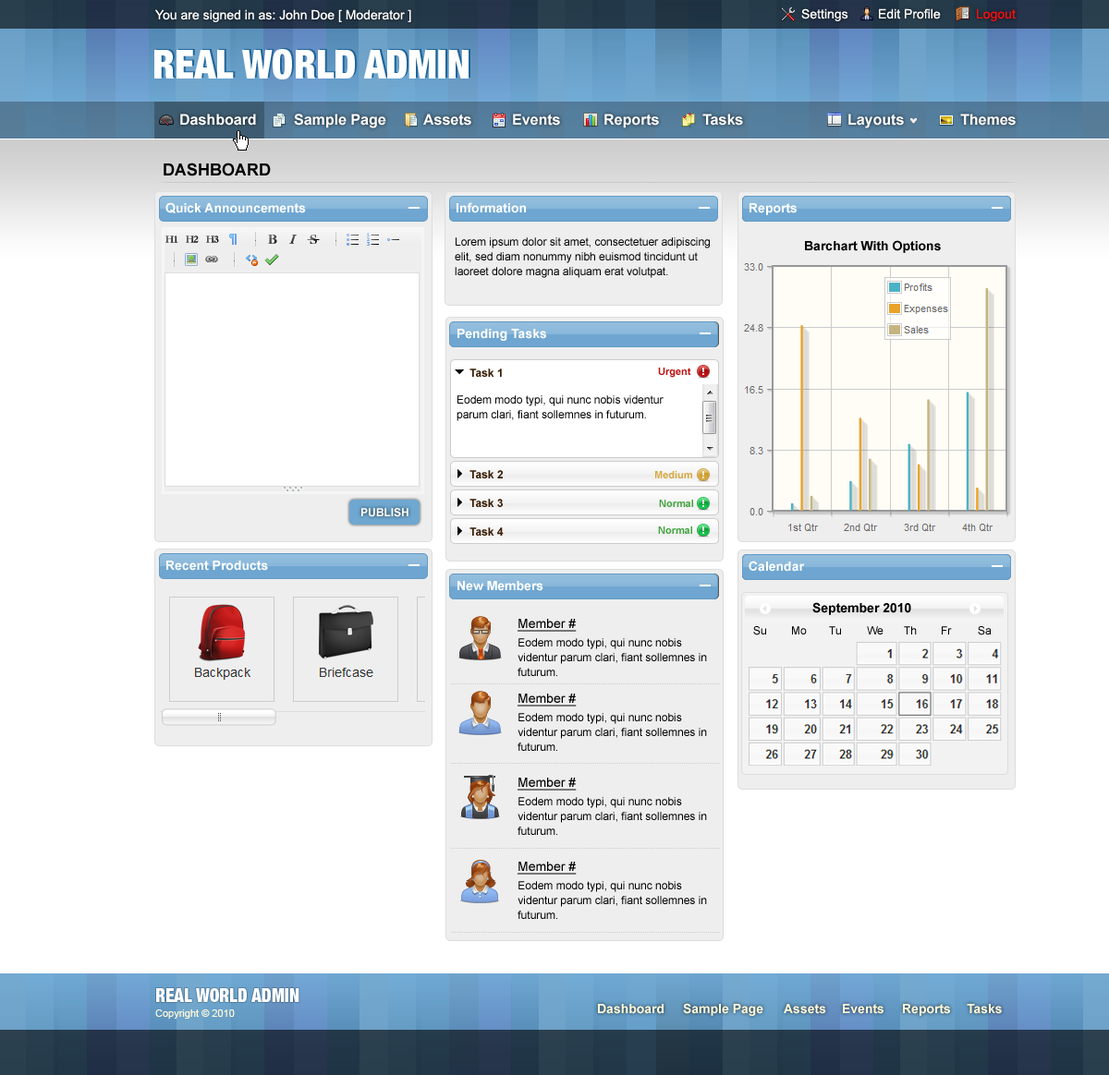
<style>
.page{position:relative;width:1109px;height:1075px;background:#ffffff}
.page>*{position:absolute;margin:0}
.t1{font:12.9px "ArialMT";color:#ffffff}
.t2{font:12.9px "ArialMT";color:#fa0f0f}
.t3{font:14.8px "Arial-BoldMT";color:#ffffff}
.t4{font:16.6px "Arial-BoldMT";color:#000000;text-transform:uppercase}
.t5{font:12.9px "Arial-BoldMT";color:#ffffff}
.t6{font:11.1px/14.8px "ArialMT";color:#000000}
.t7{font:12.9px "Arial-BoldMT";color:#000000}
.t8{font:11.1px "Arial-BoldMT";color:#371c04}
.t9{font:10.2px "Arial-BoldMT";color:#be1111}
.t10{font:10.2px "Arial-BoldMT";color:#d6a73e}
.t11{font:11.1px "Arial-BoldMT";color:#ffffff;text-transform:uppercase}
.t12{font:10.2px "Arial-BoldMT";color:#41a13c}
.t13{font:12.9px "ArialMT";color:#000000;text-decoration:underline}
.t14{font:11.1px "ArialMT";color:#000000}
.t15{font:10.2px "ArialMT";color:#fff9d8}
.t16{font:12.9px "Arial-BoldMT";color:#fff9d8}
</style>
<div class="page">
<p class="t1" style="left:155px;top:9px;width:256px;height:13px">You are signed in as: John Doe [ Moderator ]</p>
<p class="t1" style="left:801px;top:8px;width:47px;height:13px">Settings</p>
<p class="t1" style="left:879px;top:8px;width:62px;height:11px">Edit Profile</p>
<p class="t2" style="left:977px;top:8px;width:38px;height:13px">Logout</p>
<p class="t3" style="left:180px;top:114px;width:76px;height:12px">Dashboard</p>
<p class="t3" style="left:294px;top:114px;width:92px;height:14px">Sample Page</p>
<p class="t3" style="left:423px;top:114px;width:48px;height:12px">Assets</p>
<p class="t3" style="left:513px;top:114px;width:47px;height:12px">Events</p>
<p class="t3" style="left:604px;top:114px;width:55px;height:14px">Reports</p>
<p class="t3" style="left:702px;top:114px;width:41px;height:12px">Tasks</p>
<p class="t3" style="left:848px;top:114px;width:56px;height:14px">Layouts</p>
<p class="t3" style="left:960px;top:114px;width:55px;height:12px">Themes</p>
<p class="t4" style="left:164px;top:163px;width:107px;height:13px">DASHBOARD</p>
<p class="t5" style="left:165px;top:202px;width:141px;height:11px">Quick Announcements</p>
<p class="t5" style="left:456px;top:202px;width:70px;height:11px">Information</p>
<p class="t5" style="left:749px;top:203px;width:47px;height:12px">Reports</p>
<p class="t6" style="left:455px;top:237px;width:255px;height:41px">Lorem ipsum dolor sit amet, consectetuer adipiscing elit, sed diam nonummy nibh euismod tincidunt ut laoreet dolore magna aliquam erat volutpat.</p>
<p class="t7" style="left:805px;top:240px;width:136px;height:13px">Barchart With Options</p>
<p class="t5" style="left:457px;top:329px;width:89px;height:12px">Pending Tasks</p>
<p class="t8" style="left:469px;top:369px;width:33px;height:8px">Task 1</p>
<p class="t9" style="left:658px;top:368px;width:33px;height:10px">Urgent</p>
<p class="t6" style="left:456px;top:395px;width:207px;height:26px">Eodem modo typi, qui nunc nobis videntur parum clari, fiant sollemnes in futurum.</p>
<p class="t8" style="left:469px;top:470px;width:34px;height:9px">Task 2</p>
<p class="t10" style="left:655px;top:471px;width:37px;height:8px">Medium</p>
<p class="t11" style="left:361px;top:508px;width:47px;height:9px">Publish</p>
<p class="t8" style="left:469px;top:499px;width:34px;height:8px">Task 3</p>
<p class="t12" style="left:659px;top:500px;width:34px;height:7px">Normal</p>
<p class="t8" style="left:469px;top:528px;width:35px;height:8px">Task 4</p>
<p class="t12" style="left:658px;top:527px;width:34px;height:7px">Normal</p>
<p class="t5" style="left:166px;top:561px;width:102px;height:10px">Recent Products</p>
<p class="t5" style="left:748px;top:561px;width:57px;height:11px">Calendar</p>
<p class="t5" style="left:457px;top:581px;width:86px;height:10px">New Members</p>
<p class="t7" style="left:812px;top:602px;width:99px;height:13px">September 2010</p>
<p class="t13" style="left:517px;top:619px;width:60px;height:13px">Member #</p>
<p class="t14" style="left:753px;top:626px;width:13px;height:10px">Su</p>
<p class="t14" style="left:792px;top:626px;width:15px;height:9px">Mo</p>
<p class="t14" style="left:829px;top:626px;width:12px;height:9px">Tu</p>
<p class="t14" style="left:867px;top:626px;width:16px;height:9px">We</p>
<p class="t14" style="left:904px;top:626px;width:13px;height:9px">Th</p>
<p class="t14" style="left:942px;top:626px;width:10px;height:9px">Fr</p>
<p class="t14" style="left:978px;top:626px;width:13px;height:10px">Sa</p>
<p class="t6" style="left:517px;top:638px;width:190px;height:38px">Eodem modo typi, qui nunc nobis videntur parum clari, fiant sollemnes in futurum.</p>
<p class="t13" style="left:517px;top:694px;width:60px;height:13px">Member #</p>
<p class="t6" style="left:517px;top:713px;width:190px;height:38px">Eodem modo typi, qui nunc nobis videntur parum clari, fiant sollemnes in futurum.</p>
<p class="t13" style="left:517px;top:778px;width:60px;height:13px">Member #</p>
<p class="t6" style="left:517px;top:797px;width:190px;height:38px">Eodem modo typi, qui nunc nobis videntur parum clari, fiant sollemnes in futurum.</p>
<p class="t13" style="left:517px;top:862px;width:60px;height:13px">Member #</p>
<p class="t6" style="left:517px;top:881px;width:190px;height:38px">Eodem modo typi, qui nunc nobis videntur parum clari, fiant sollemnes in futurum.</p>
<p class="t15" style="left:155px;top:1010px;width:80px;height:9px">Copyright © 2010</p>
<p class="t16" style="left:598px;top:1004px;width:65px;height:11px">Dashboard</p>
<p class="t16" style="left:683px;top:1003px;width:80px;height:13px">Sample Page</p>
<p class="t16" style="left:784px;top:1004px;width:42px;height:11px">Assets</p>
<p class="t16" style="left:843px;top:1004px;width:40px;height:11px">Events</p>
<p class="t16" style="left:903px;top:1004px;width:47px;height:12px">Reports</p>
<p class="t16" style="left:966px;top:1004px;width:36px;height:11px">Tasks</p>
</div>
